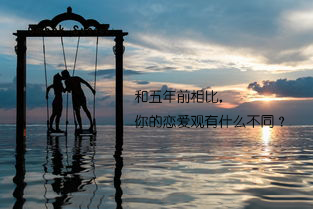
<style>
.page{position:relative;width:313px;height:209px}
.page>*{position:absolute;margin:0}
.t1{font:14px "YouYuan";color:#000000}
</style>
<div class="page">
<p class="t1" style="left:134px;top:89px;width:151px;height:40px">和五年前相比，<br>你的恋爱观有什么不同？</p>
</div>
